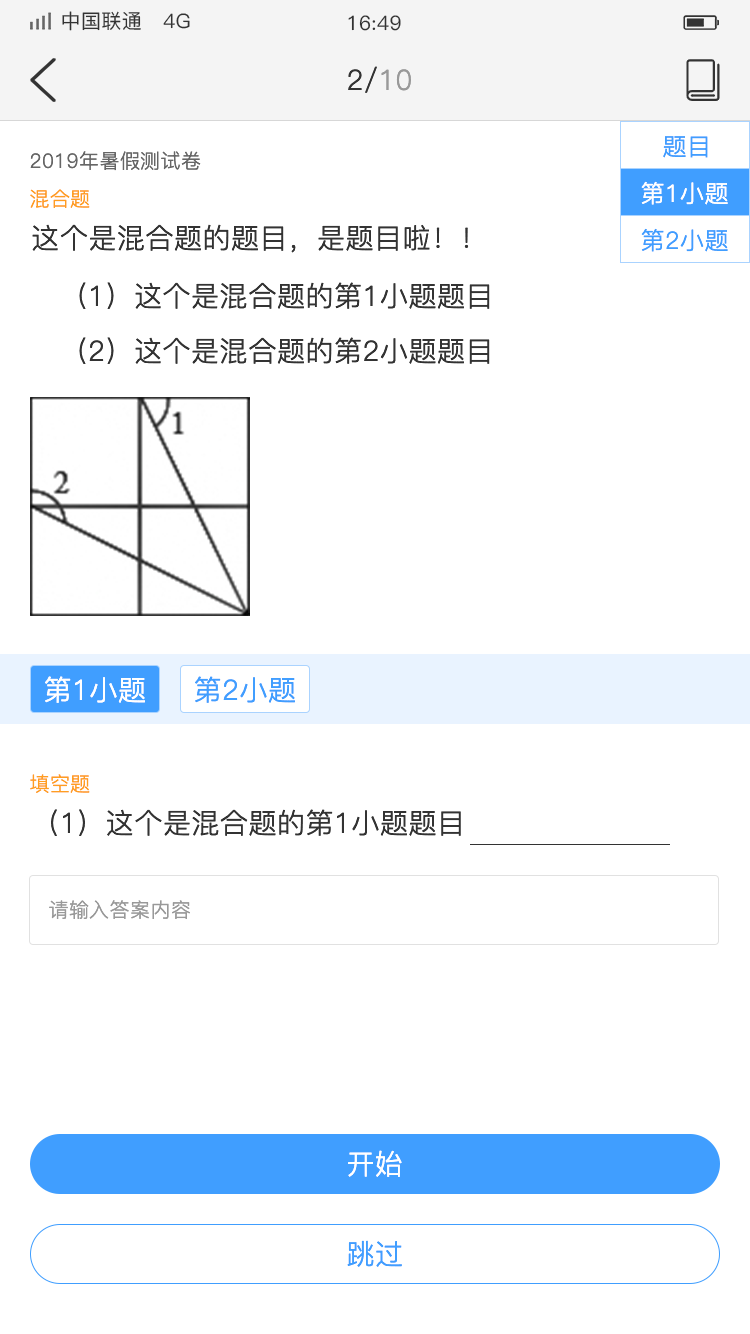
<style>
.page{position:relative;width:750px;height:1334px;background:#ffffff}
.page>*{position:absolute;margin:0}
.t1{font:20px "PingFang-SC-Medium";letter-spacing:0.02em;color:#333333}
.t2{font:28px "PingFang-SC-Regular";letter-spacing:0.02em;color:#333333}
.t3{font:28px "PingFang-SC-Regular";letter-spacing:0.02em;color:#999999}
.t4{font:24px "PingFang-SC-Regular";letter-spacing:0.02em;color:#409eff}
.t5{font:20px "PingFang-SC-Regular";letter-spacing:0.02em;color:#666666}
.t6{font:24px "PingFang-SC-Regular";letter-spacing:0.02em;color:#ffffff}
.t7{font:20px "PingFang-SC-Regular";letter-spacing:0.02em;color:#ff9e21}
.t8{font:28px "PingFang-SC-Regular";letter-spacing:0.02em;color:#ffffff}
.t9{font:28px "PingFang-SC-Regular";letter-spacing:0.02em;color:#409eff}
.t10{font:20px "PingFang-SC-Regular";letter-spacing:0.02em;color:#999999}
</style>
<div class="page">
<p class="t1" style="left:62px;top:11px;width:128px;height:20px">中国联通   4G</p>
<p class="t1" style="left:348px;top:15px;width:53px;height:16px">16:49</p>
<p class="t2" style="left:348px;top:66px;width:63px;height:27px">2/<span class="t3">10</span></p>
<p class="t4" style="left:663px;top:136px;width:45px;height:22px">题目</p>
<p class="t5" style="left:30px;top:151px;width:171px;height:20px">2019年暑假测试卷</p>
<p class="t6" style="left:641px;top:181px;width:87px;height:24px">第1小题</p>
<p class="t7" style="left:30px;top:189px;width:60px;height:19px">混合题</p>
<p class="t2" style="left:32px;top:224px;width:437px;height:29px">这个是混合题的题目，是题目啦！！</p>
<p class="t4" style="left:641px;top:228px;width:87px;height:24px">第2小题</p>
<p class="t2" style="left:79px;top:282px;width:411px;height:27px">（1）这个是混合题的第1小题题目</p>
<p class="t2" style="left:79px;top:337px;width:411px;height:27px">（2）这个是混合题的第2小题题目</p>
<p class="t8" style="left:45px;top:676px;width:100px;height:27px">第1小题</p>
<p class="t9" style="left:195px;top:676px;width:100px;height:27px">第2小题</p>
<p class="t7" style="left:30px;top:774px;width:60px;height:19px">填空题</p>
<p class="t2" style="left:51px;top:809px;width:410px;height:27px">（1）这个是混合题的第1小题题目</p>
<p class="t10" style="left:49px;top:900px;width:141px;height:19px">请输入答案内容</p>
<p class="t8" style="left:348px;top:1150px;width:54px;height:27px">开始</p>
<p class="t9" style="left:347px;top:1240px;width:55px;height:27px">跳过</p>
</div>
